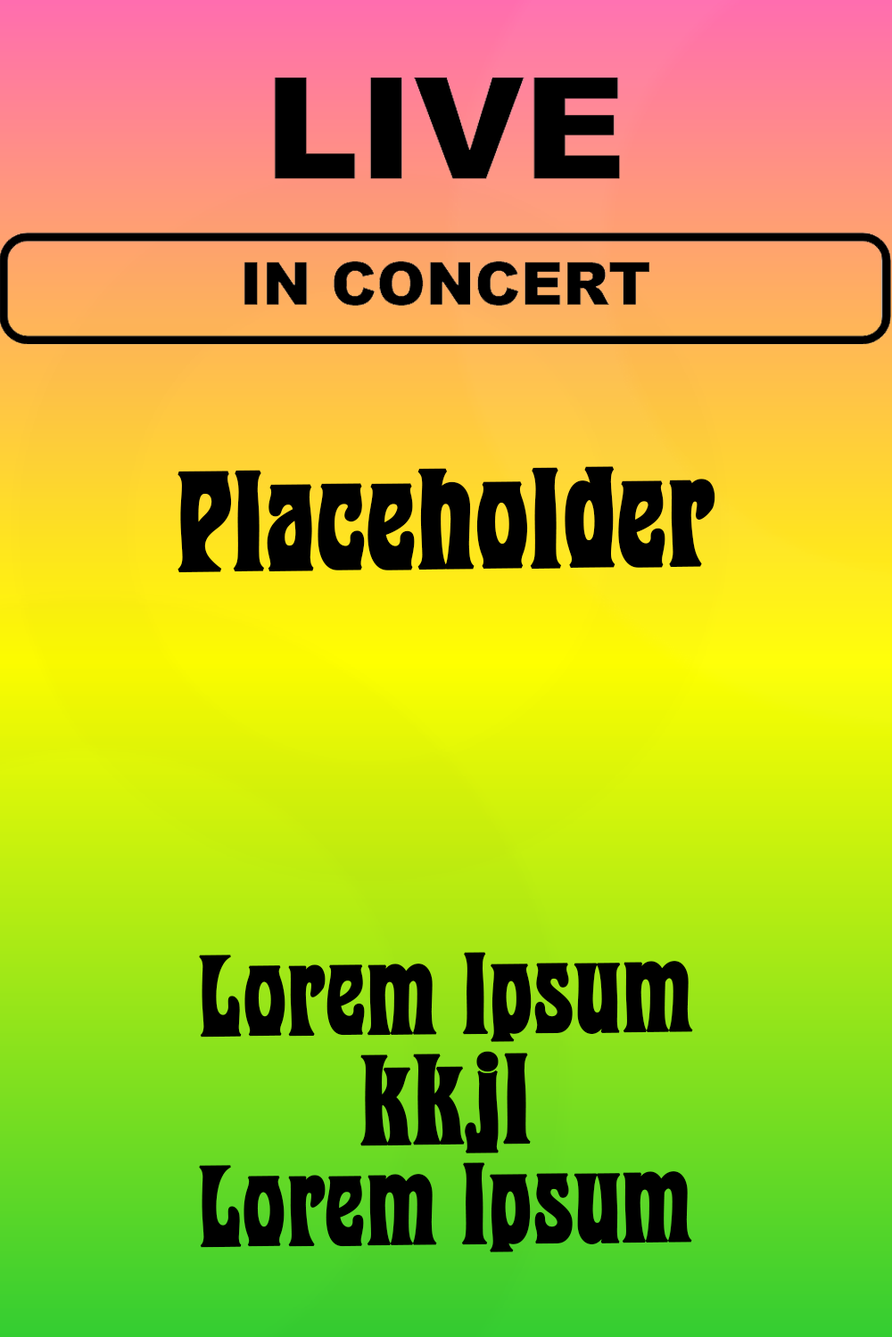
<style>
.page{position:relative;width:892px;height:1337px}
.page>*{position:absolute;margin:0}
.t1{font:118.5px "PurePsychedelia-Bold";color:#000000;font-weight:bold}
.t2{font:96.9px "PurePsychedelia-Bold";color:#000000;font-weight:bold}
.t3{font:107.7px "PurePsychedelia-Bold";color:#000000;font-weight:bold}
</style>
<div class="page">
<p class="t1" style="left:177px;top:466px;width:538px;height:107px;rotate:-1deg">Placeholder</p>
<p class="t2" style="left:199px;top:952px;width:494px;height:90px;rotate:-1deg">Lorem Ipsum</p>
<p class="t3" style="left:360px;top:1051px;width:171px;height:103px;rotate:-1deg">kkjl</p>
<p class="t2" style="left:199px;top:1163px;width:493px;height:90px;rotate:-1deg">Lorem Ipsum</p>
</div>
